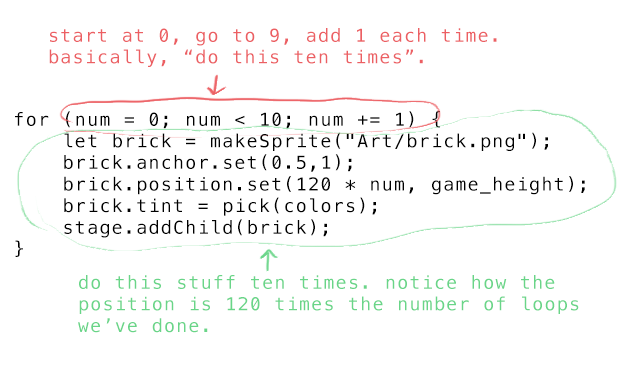
<style>
.page{position:relative;width:635px;height:373px;background:#ffffff}
.page>*{position:absolute;margin:0}
.t1{font:18px "Menlo-Regular";letter-spacing:0.08em;color:#ec5f63}
.t2{font:18px "Menlo-Regular";letter-spacing:0.08em;color:#000000}
.t3{font:18px "Menlo-Regular";letter-spacing:0.08em;color:#69d588}
</style>
<div class="page">
<p class="t1" style="left:49px;top:28px;width:448px;height:39px">start at 0, go to 9, add 1 each time.<br>basically, “do this ten times”.</p>
<p class="t2" style="left:15px;top:111px;width:570px;height:146px">for (num = 0; num &lt; 10; num += 1) {<br>    let brick = makeSprite("Art/brick.png");<br>    brick.anchor.set(0.5,1);<br>    brick.position.set(120 * num, game_height);<br>    brick.tint = pick(colors);<br>    stage.addChild(brick);<br>}</p>
<p class="t3" style="left:78px;top:275px;width:501px;height:58px">do this stuff ten times. notice how the position is 120 times the number of loops we’ve done.</p>
</div>
